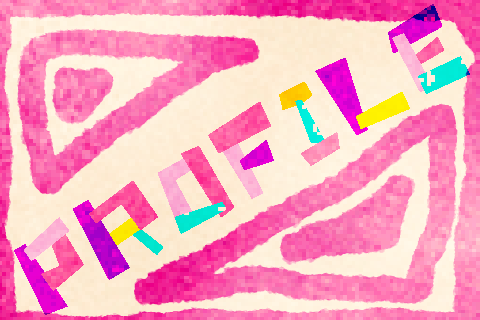
<style>
.page{position:relative;width:480px;height:320px}
.page>*{position:absolute;margin:0}
.t1{font:96px "Pigmo05ClrNormal";letter-spacing:0.05em}
</style>
<div class="page">
<p class="t1" style="left:14px;top:4px;width:456px;height:311px;rotate:-30deg">PROFILE</p>
</div>
